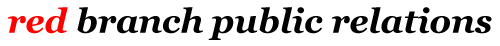
<style>
.page{position:relative;width:500px;height:46px;background:#ffffff}
.page>*{position:absolute;margin:0}
.t1{font:33.8px "Georgia-BoldItalic";color:#000000}
.t2{font:33.8px "Georgia-BoldItalic";color:#ff0000}
</style>
<div class="page">
<p class="t1" style="left:7px;top:7px;width:485px;height:33px"><span class="t2">red</span> branch public relations</p>
</div>
